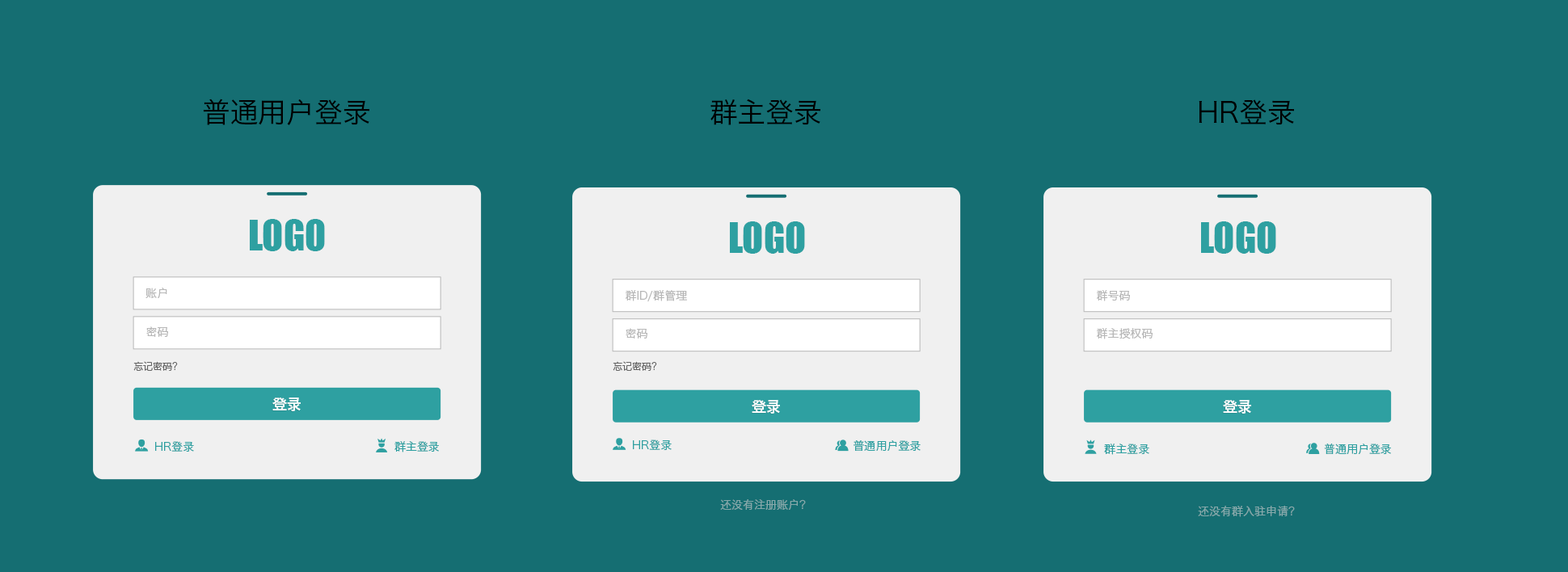
<style>
.page{position:relative;width:1568px;height:572px;background:#156e72}
.page>*{position:absolute;margin:0}
.t1{font:28.1px "HiraginoSansGB-W3";color:#000000}
.t2{font:38.8px "Impact";color:#2ea0a1;text-transform:uppercase}
.t3{font:11.3px "HiraginoSansGB-W3";color:#b7b7b7}
.t4{font:9.7px "HiraginoSansGB-W3";color:#666666;text-transform:uppercase}
.t5{font:14.5px "HiraginoSansGB-W6";color:#ffffff;text-transform:uppercase}
.t6{font:11.3px "HiraginoSansGB-W3";color:#2ea0a1}
.t7{font:11.3px "HiraginoSansGB-W3";color:#86a9ab;text-transform:uppercase}
</style>
<div class="page">
<p class="t1" style="left:203px;top:99px;width:166px;height:26px">普通用户登录</p>
<p class="t1" style="left:710px;top:99px;width:110px;height:26px">群主登录</p>
<p class="t1" style="left:1199px;top:99px;width:95px;height:26px">HR登录</p>
<p class="t2" style="left:250px;top:219px;width:75px;height:32px">logo</p>
<p class="t2" style="left:730px;top:221px;width:75px;height:33px">logo</p>
<p class="t2" style="left:1201px;top:221px;width:75px;height:33px">logo</p>
<p class="t3" style="left:145px;top:288px;width:22px;height:10px">账户</p>
<p class="t3" style="left:626px;top:290px;width:61px;height:12px">群ID/群管理</p>
<p class="t3" style="left:1097px;top:290px;width:33px;height:11px">群号码</p>
<p class="t3" style="left:146px;top:327px;width:22px;height:10px">密码</p>
<p class="t3" style="left:626px;top:328px;width:21px;height:11px">密码</p>
<p class="t3" style="left:1097px;top:328px;width:56px;height:11px">群主授权码</p>
<p class="t4" style="left:133px;top:361px;width:45px;height:10px">忘记密码?</p>
<p class="t4" style="left:613px;top:361px;width:44px;height:10px">忘记密码?</p>
<p class="t5" style="left:272px;top:398px;width:29px;height:13px">登录</p>
<p class="t5" style="left:752px;top:400px;width:28px;height:14px">登录</p>
<p class="t5" style="left:1223px;top:400px;width:28px;height:14px">登录</p>
<p class="t6" style="left:155px;top:441px;width:39px;height:11px">HR登录</p>
<p class="t6" style="left:394px;top:441px;width:45px;height:12px">群主登录</p>
<p class="t6" style="left:633px;top:440px;width:39px;height:10px">HR登录</p>
<p class="t6" style="left:854px;top:440px;width:67px;height:11px">普通用户登录</p>
<p class="t6" style="left:1104px;top:444px;width:45px;height:11px">群主登录</p>
<p class="t6" style="left:1324px;top:444px;width:67px;height:10px">普通用户登录</p>
<p class="t7" style="left:720px;top:499px;width:86px;height:11px">还没有注册账户?</p>
<p class="t7" style="left:1198px;top:506px;width:97px;height:11px">还没有群入驻申请?</p>
</div>
